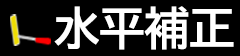
<style>
.page{position:relative;width:240px;height:56px;background:#000000}
.page>*{position:absolute;margin:0}
.t1{font:44.8px "BIZ-UDPGothic-Bold";color:#ffffff}
</style>
<div class="page">
<p class="t1" style="left:54px;top:6px;width:180px;height:44px">水平補正</p>
</div>
